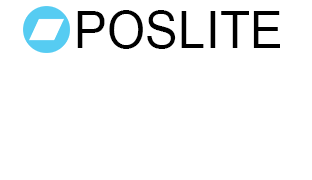
<style>
.page{position:relative;width:312px;height:180px;background:#ffffff}
.page>*{position:absolute;margin:0}
.t1{font:52.4px "ArialMT";letter-spacing:0.01em;color:#000000;scale:0.93 1}
</style>
<div class="page">
<p class="t1" style="left:77px;top:10px;width:203px;height:39px">POSLITE</p>
</div>
